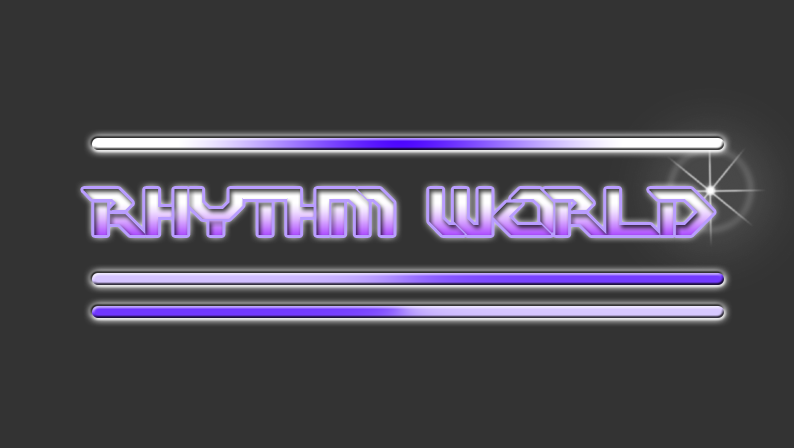
<style>
.page{position:relative;width:794px;height:448px;background:#333333}
.page>*{position:absolute;margin:0}
.t1{font:64px "PerfectDark(BRK)";font-weight:bold}
</style>
<div class="page">
<p class="t1" style="left:83px;top:189px;width:631px;height:46px">Rhythm World</p>
</div>
